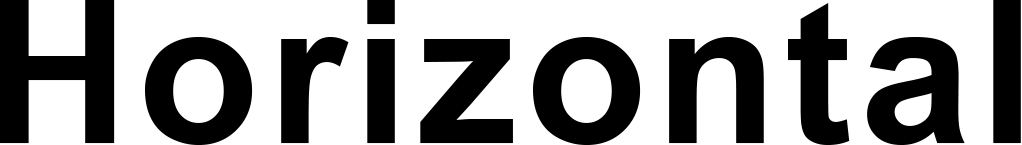
<style>
.page{position:relative;width:1022px;height:145px;background:#ffffff}
.page>*{position:absolute;margin:0}
.t1{font:200px "Arial-BoldMT";letter-spacing:0.04em;color:#000000}
</style>
<div class="page">
<p class="t1" style="left:0px;top:0px;width:1021px;height:145px">Horizontal</p>
</div>
